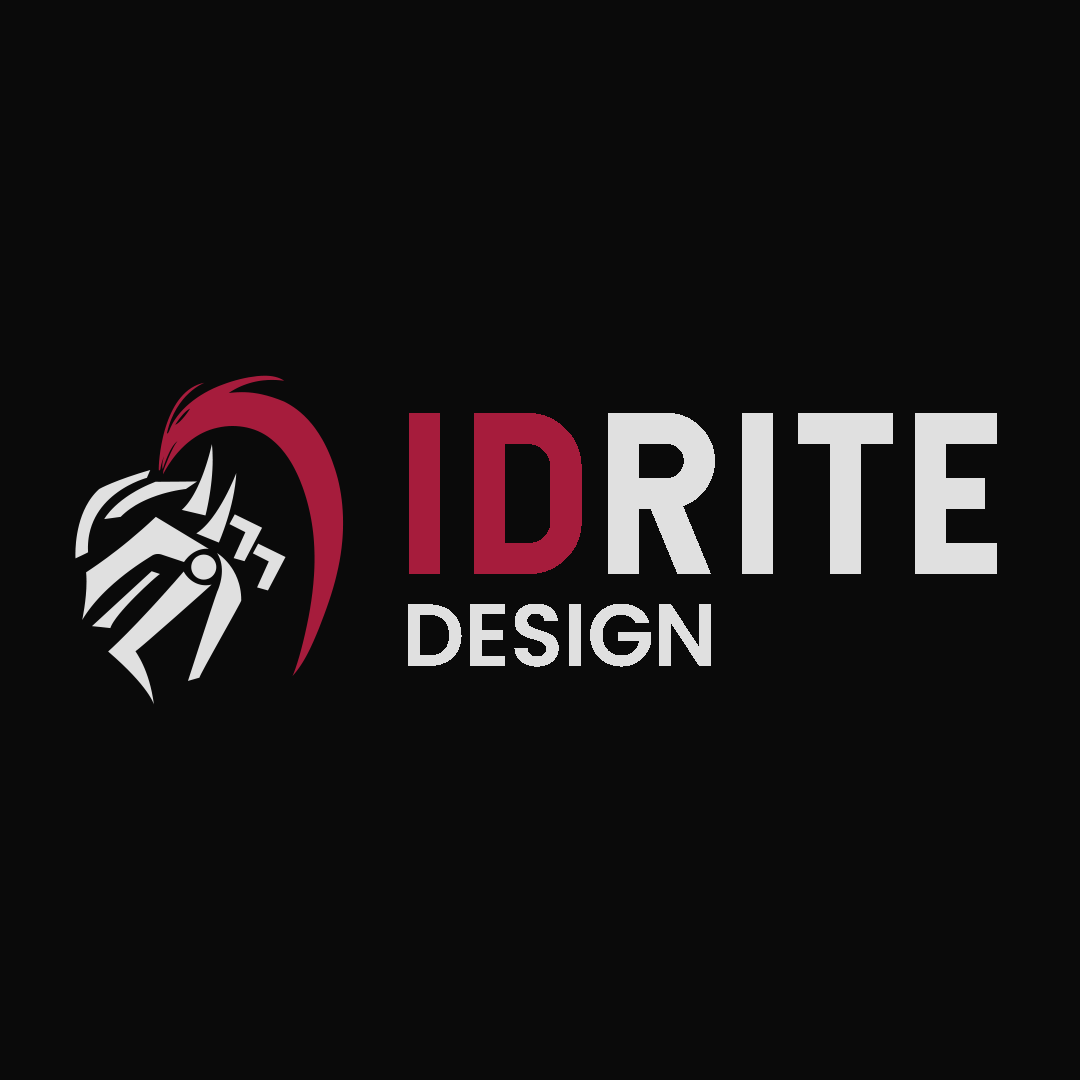
<style>
.page{position:relative;width:1080px;height:1080px;background:#0a0a0a}
.page>*{position:absolute;margin:0}
.t1{font:219.9px "Hansief";letter-spacing:0.04em;color:#e0e0e0;text-transform:uppercase}
.t2{font:219.9px "Hansief";letter-spacing:0.04em;color:#a61c3c;text-transform:uppercase}
.t3{font:88.3px "Poppins-SemiBold";letter-spacing:-0.006em;color:#e0e0e0;text-transform:uppercase}
</style>
<div class="page">
<p class="t1" style="left:409px;top:413px;width:588px;height:161px"><span class="t2">id</span>rite</p>
<p class="t3" style="left:408px;top:604px;width:303px;height:63px">design</p>
</div>
